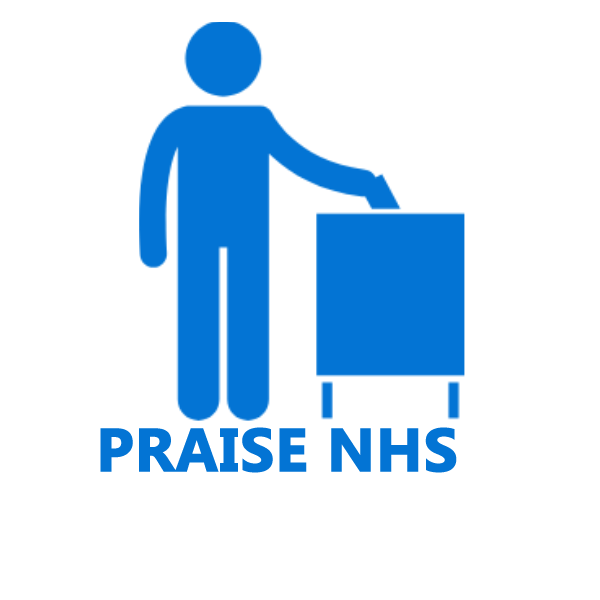
<style>
.page{position:relative;width:600px;height:600px;background:#ffffff}
.page>*{position:absolute;margin:0}
.t1{font:60px "Ebrima-Bold";color:#0374d4;font-weight:bold}
</style>
<div class="page">
<p class="t1" style="left:100px;top:427px;width:357px;height:46px">PRAISE NHS</p>
</div>
